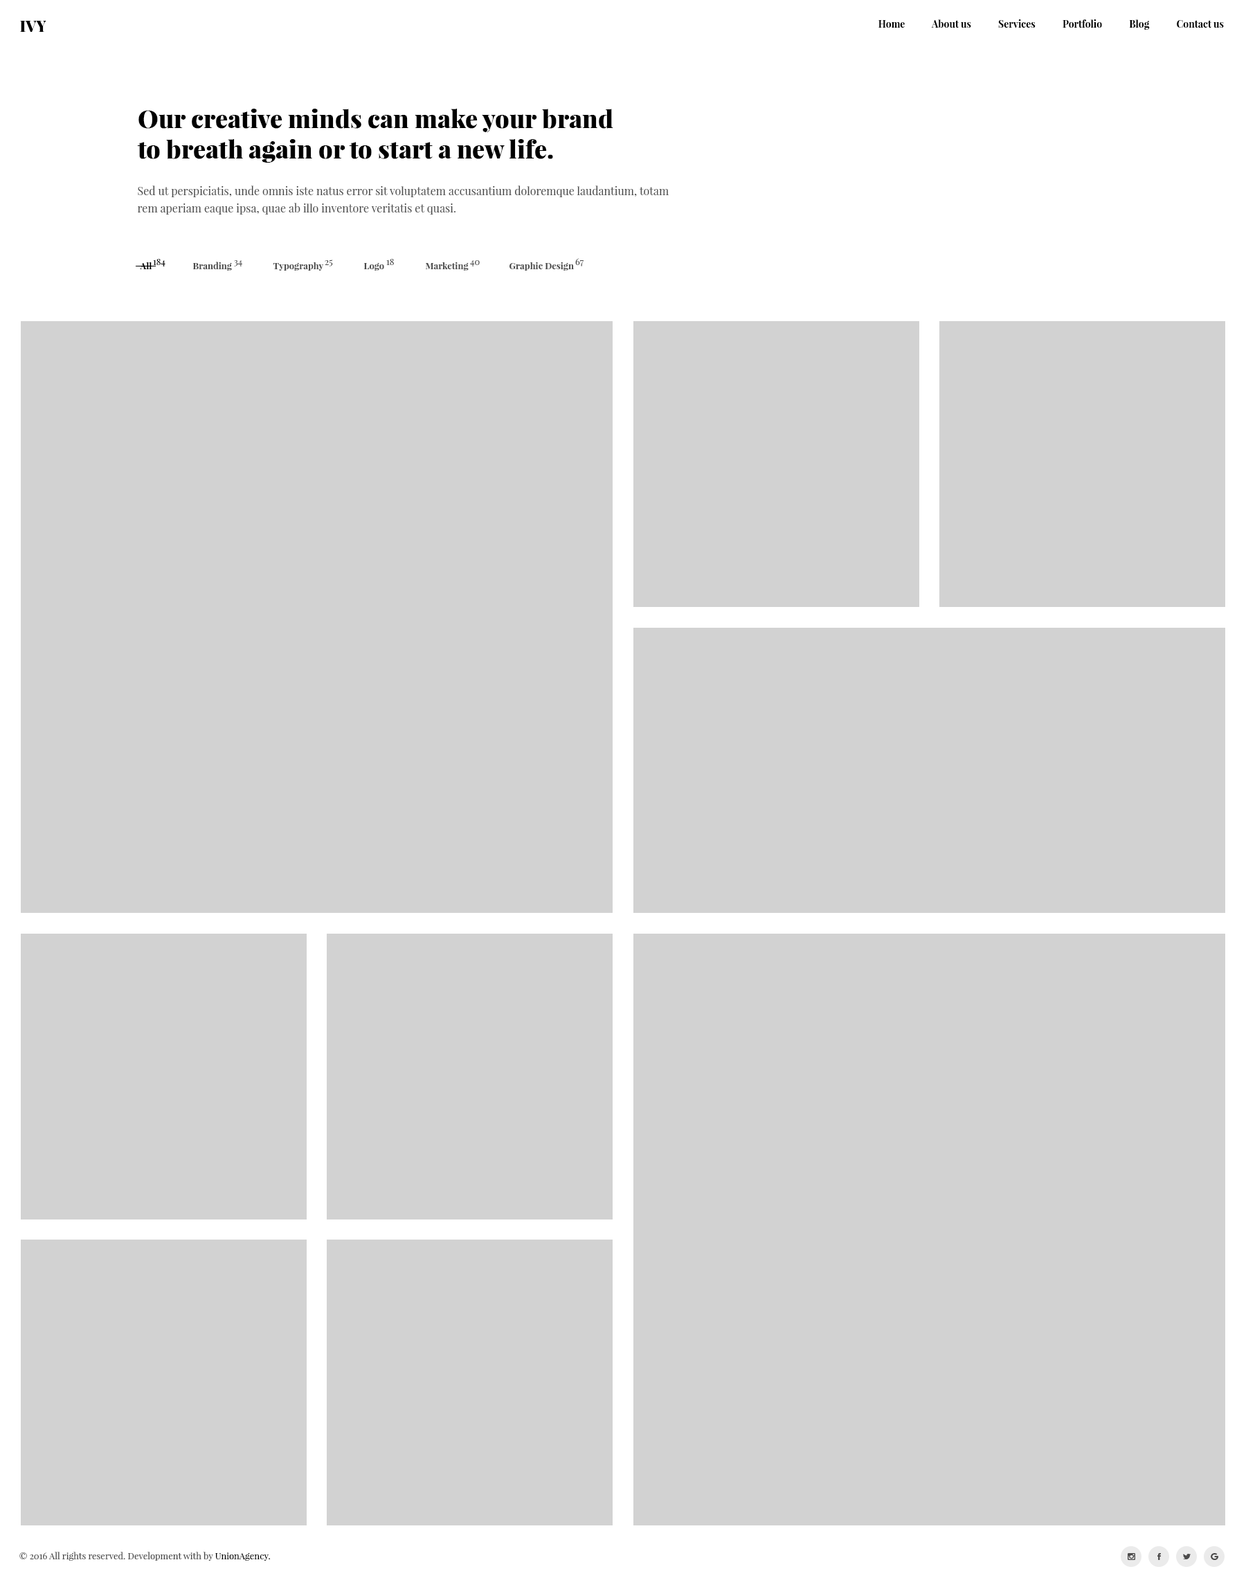
<style>
.page{position:relative;width:1246px;height:1587px;background:#d2d2d2}
.page>*{position:absolute;margin:0}
.t1{font:15.2px "PlayfairDisplay-Black";color:#000000}
.t2{font:9.7px "PlayfairDisplay-Bold";color:#000000}
.t3{font:24.9px/30.5px "PlayfairDisplay-Black";color:#000000}
.t4{font:11.1px/17.3px "PlayfairDisplay-Regular";color:#494949}
.t5{font:9px "PlayfairDisplay-Bold";color:#000000}
.t6{font:9px "PlayfairDisplay-Regular";color:#000000}
.t7{font:9px "PlayfairDisplay-Bold";color:#494949}
.t8{font:9px "PlayfairDisplay-Regular";color:#494949}
</style>
<div class="page">
<p class="t1" style="left:20px;top:21px;width:26px;height:11px">IVY</p>
<p class="t2" style="left:879px;top:19px;width:345px;height:11px">Home            About us            Services            Portfolio            Blog            Contact us</p>
<p class="t3" style="left:137px;top:109px;width:476px;height:54px">Our creative minds can make your brand <br>to breath again or to start a new life.</p>
<p class="t4" style="left:138px;top:186px;width:531px;height:29px">Sed ut perspiciatis, unde omnis iste natus error sit voluptatem accusantium doloremque laudantium, totam<br>rem aperiam eaque ipsa, quae ab illo inventore veritatis et quasi.</p>
<p class="t5" style="left:140px;top:262px;width:12px;height:7px">All</p>
<p class="t6" style="left:153px;top:259px;width:12px;height:8px">184</p>
<p class="t7" style="left:192px;top:262px;width:40px;height:9px">Branding</p>
<p class="t8" style="left:234px;top:260px;width:8px;height:7px">34</p>
<p class="t7" style="left:273px;top:262px;width:51px;height:9px">Typography</p>
<p class="t8" style="left:325px;top:260px;width:8px;height:7px">25</p>
<p class="t7" style="left:363px;top:263px;width:21px;height:8px">Logo</p>
<p class="t8" style="left:386px;top:259px;width:8px;height:6px">18</p>
<p class="t7" style="left:426px;top:262px;width:43px;height:9px">Marketing</p>
<p class="t8" style="left:470px;top:260px;width:10px;height:7px">40</p>
<p class="t7" style="left:510px;top:262px;width:64px;height:9px">Graphic Design</p>
<p class="t8" style="left:575px;top:258px;width:9px;height:9px">67</p>
<p class="t8" style="left:19px;top:1552px;width:252px;height:9px">© 2016 All rights reserved. Development with by <span class="t6">UnionAgency.</span></p>
</div>
